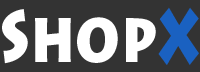
<style>
.page{position:relative;width:200px;height:72px;background:#333333}
.page>*{position:absolute;margin:0}
.t1{font:73px "LithosPro-Black";color:#ffffff;scale:0.74 1}
.t2{font:73px "LithosPro-Black";color:#1a61c1;scale:0.74 1}
</style>
<div class="page">
<p class="t1" style="left:2px;top:7px;width:197px;height:58px">Shop<span class="t2">X</span></p>
</div>
